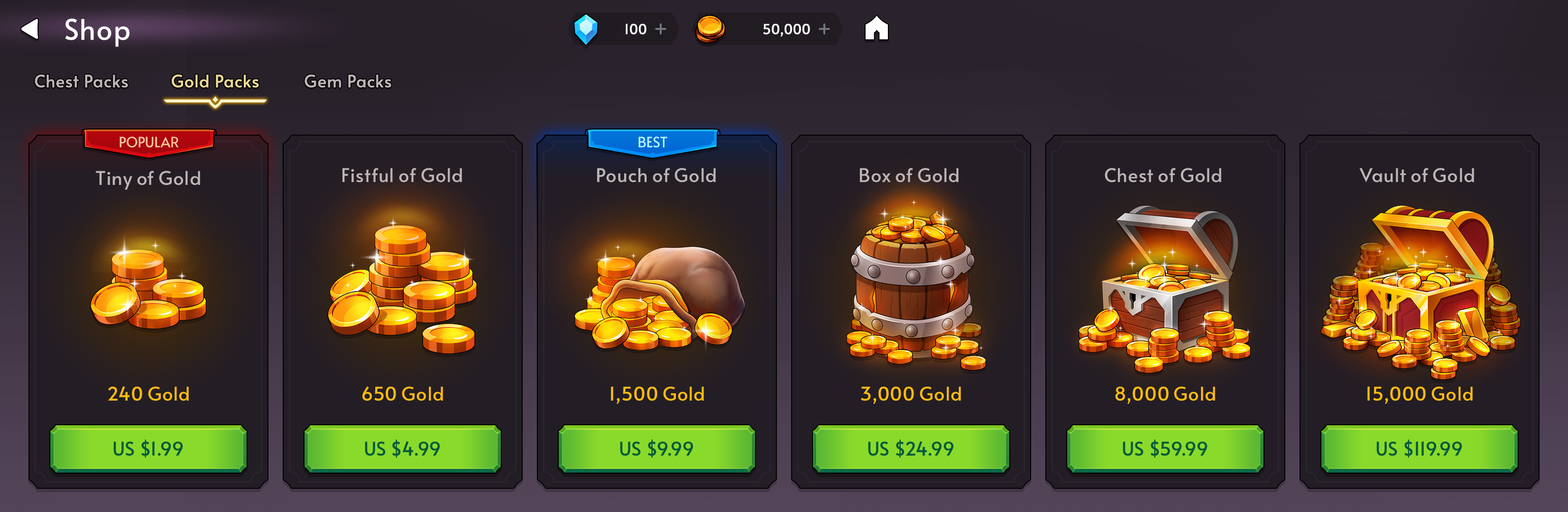
<style>
.page{position:relative;width:1568px;height:512px}
.page>*{position:absolute;margin:0}
.t1{font:28.5px "Alata-Regular";color:#ffffff}
.t2{font:13.7px "Alata-Regular";letter-spacing:-0.025em;color:#ffffff;font-weight:bold}
.t3{font:17.1px "Alata-Regular";color:#beb5b6;font-weight:bold}
.t4{font:17.1px "Alata-Regular";color:#ecd895;font-weight:bold}
.t5{font:14.2px "Alata-Regular";color:#ffc69c;text-transform:uppercase}
.t6{font:14.2px "Alata-Regular";color:#b6f5ff;text-transform:uppercase}
.t7{font:19px "Alata-Regular";letter-spacing:-0.01em;color:#beb5b6}
.t8{font:19px "Alata-Regular";letter-spacing:-0.01em;color:#ffbc12}
.t9{font:19px "Alata-Regular";color:#045a39}
</style>
<div class="page">
<p class="t1" style="left:65px;top:18px;width:64px;height:29px">Shop</p>
<p class="t2" style="left:626px;top:23px;width:20px;height:12px">100</p>
<p class="t2" style="left:763px;top:24px;width:47px;height:13px">50,000</p>
<p class="t3" style="left:35px;top:74px;width:93px;height:14px">Chest Packs</p>
<p class="t4" style="left:172px;top:74px;width:87px;height:14px">Gold Packs</p>
<p class="t3" style="left:304px;top:74px;width:87px;height:14px">Gem Packs</p>
<p class="t5" style="left:120px;top:137px;width:59px;height:11px">popular</p>
<p class="t6" style="left:638px;top:137px;width:29px;height:11px">Best</p>
<p class="t7" style="left:96px;top:171px;width:104px;height:19px">Tiny of Gold</p>
<p class="t7" style="left:342px;top:168px;width:120px;height:15px">Fistful of Gold</p>
<p class="t7" style="left:597px;top:168px;width:119px;height:15px">Pouch of Gold</p>
<p class="t7" style="left:860px;top:168px;width:99px;height:15px">Box of Gold</p>
<p class="t7" style="left:1105px;top:168px;width:116px;height:15px">Chest of Gold</p>
<p class="t7" style="left:1359px;top:168px;width:115px;height:15px">Vault of Gold</p>
<p class="t8" style="left:108px;top:386px;width:81px;height:15px">240 Gold</p>
<p class="t8" style="left:362px;top:387px;width:81px;height:14px">650 Gold</p>
<p class="t8" style="left:611px;top:387px;width:93px;height:17px">1,500 Gold</p>
<p class="t8" style="left:861px;top:387px;width:100px;height:17px">3,000 Gold</p>
<p class="t8" style="left:1115px;top:387px;width:100px;height:17px">8,000 Gold</p>
<p class="t8" style="left:1367px;top:387px;width:106px;height:17px">15,000 Gold</p>
<p class="t9" style="left:113px;top:440px;width:70px;height:18px">US $1.99</p>
<p class="t9" style="left:365px;top:440px;width:75px;height:18px">US $4.99</p>
<p class="t9" style="left:620px;top:440px;width:73px;height:18px">US $9.99</p>
<p class="t9" style="left:868px;top:440px;width:86px;height:18px">US $24.99</p>
<p class="t9" style="left:1123px;top:440px;width:85px;height:18px">US $59.99</p>
<p class="t9" style="left:1376px;top:440px;width:86px;height:18px">US $119.99</p>
</div>
